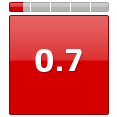
<style>
.page{position:relative;width:117px;height:117px;background:#d40000}
.page>*{position:absolute;margin:0}
.t1{font:36px "Colaborate-Bold";color:#ffffff;text-transform:uppercase}
</style>
<div class="page">
<p class="t1" style="left:35px;top:49px;width:47px;height:23px">0.7</p>
</div>
